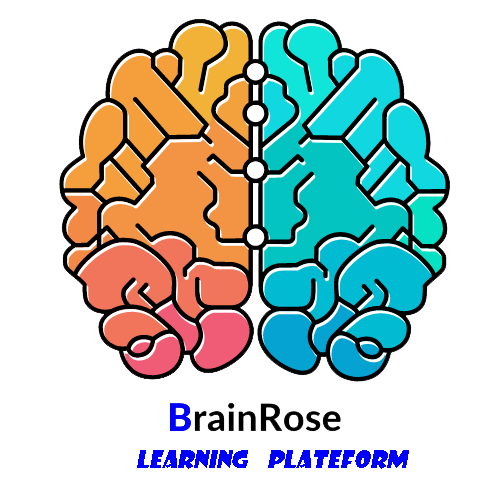
<style>
.page{position:relative;width:500px;height:500px;background:#ffffff}
.page>*{position:absolute;margin:0}
.t1{font:24px "ShowcardGothic-Reg";color:#0000ff;text-transform:uppercase;font-style:italic}
</style>
<div class="page">
<p class="t1" style="left:137px;top:450px;width:272px;height:19px">Learning    plateform</p>
</div>
